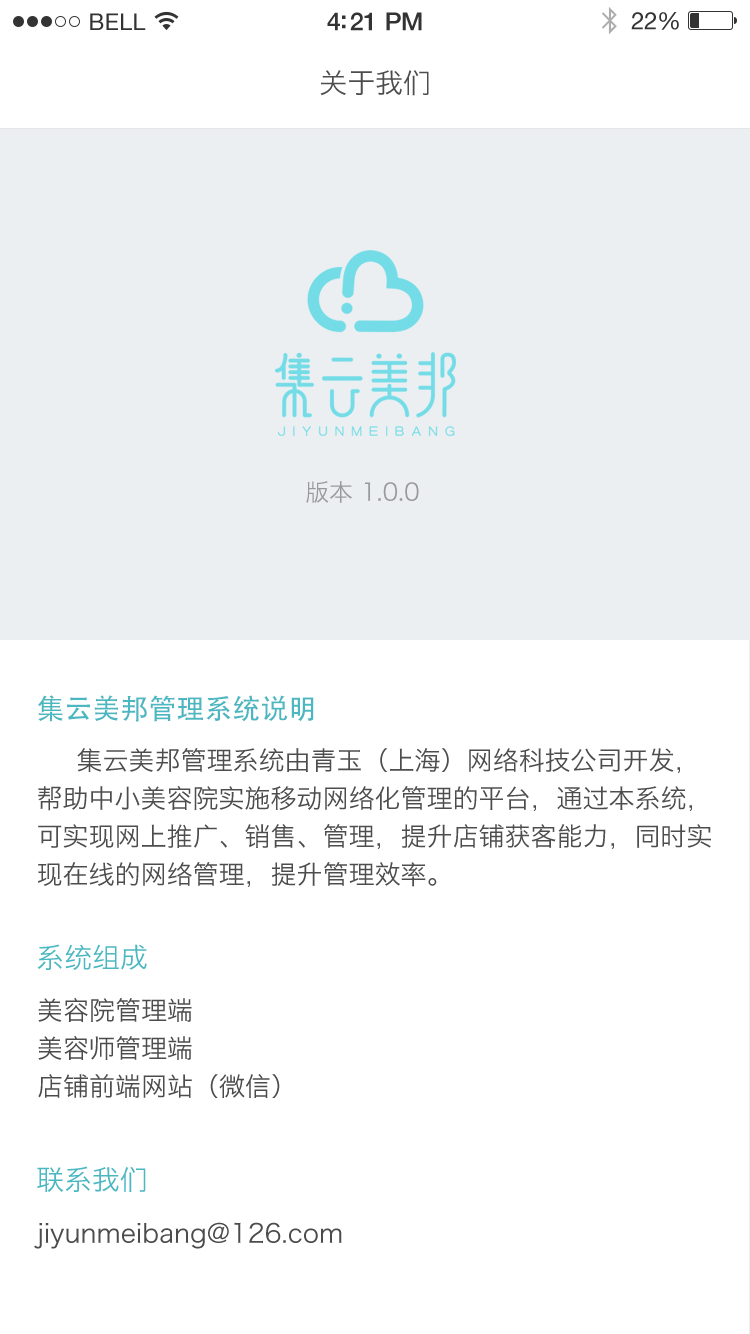
<style>
.page{position:relative;width:750px;height:1334px;background:#ffffff}
.page>*{position:absolute;margin:0}
.t1{font:28px "HiraginoSansGB-W3";color:#4d4d4d}
.t2{font:24px "HiraginoSansGB-W3";color:#999999}
.t3{font:28px "AdobeHeitiStd-Regular";color:#4bb7c1}
.t4{font:26px/38px "HiraginoSansGB-W3";color:#4d4d4d}
.t5{font:24px/38px "HiraginoSansGB-W3";color:#4d4d4d}
.t6{font:28px "HiraginoSansGB-W3";color:#4bb7c1}
.t7{font:26px/38px "HiraginoSansGB-W3";color:#4c4c4c}
.t8{font:26px "HiraginoSansGB-W3";color:#4c4c4c}
</style>
<div class="page">
<p class="t1" style="left:320px;top:70px;width:109px;height:26px">关于我们</p>
<p class="t2" style="left:306px;top:481px;width:113px;height:22px">版本 1.0.0</p>
<p class="t3" style="left:38px;top:695px;width:276px;height:27px">集云美邦管理系统说明</p>
<p class="t4" style="left:38px;top:748px;width:673px;height:139px;text-align:justify"><span class="t5">     </span>集云美邦管理系统由青玉（上海）网络科技公司开发，<br>帮助中小美容院实施移动网络化管理的平台，通过本系统，<br>可实现网上推广、销售、管理，提升店铺获客能力，同时实<br>现在线的网络管理，提升管理效率。</p>
<p class="t6" style="left:37px;top:944px;width:110px;height:26px">系统组成</p>
<p class="t7" style="left:38px;top:997px;width:242px;height:101px;text-align:justify">美容院管理端<br>美容师管理端<br>店铺前端网站（微信）</p>
<p class="t6" style="left:37px;top:1166px;width:109px;height:26px">联系我们</p>
<p class="t8" style="left:34px;top:1222px;width:308px;height:27px">jiyunmeibang@126.com</p>
</div>
